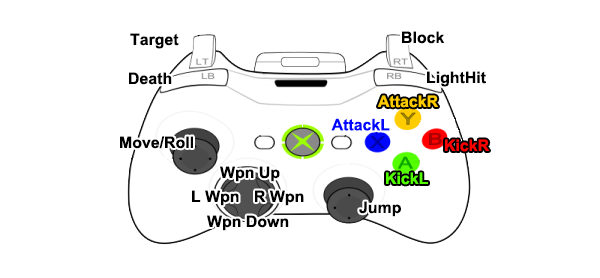
<style>
.page{position:relative;width:600px;height:278px;background:#ffffff}
.page>*{position:absolute;margin:0}
.t1{font:15.9px "Arial-BoldMT";color:#000000}
.t2{font:15.9px "Arial-BoldMT";color:#ffcc00}
.t3{font:15.9px "Arial-BoldMT";color:#0006ff}
.t4{font:15.9px "Arial-BoldMT";color:#ff0000}
.t5{font:15.9px "Arial-BoldMT";color:#54ff00}
</style>
<div class="page">
<p class="t1" style="left:130px;top:33px;width:49px;height:16px">Target</p>
<p class="t1" style="left:402px;top:31px;width:43px;height:13px">Block</p>
<p class="t1" style="left:129px;top:72px;width:43px;height:13px">Death</p>
<p class="t1" style="left:427px;top:71px;width:59px;height:16px">LightHit</p>
<p class="t2" style="left:378px;top:95px;width:60px;height:13px">AttackR</p>
<p class="t3" style="left:331px;top:118px;width:59px;height:13px">AttackL</p>
<p class="t1" style="left:120px;top:136px;width:73px;height:13px">Move/Roll</p>
<p class="t4" style="left:445px;top:139px;width:44px;height:13px">KickR</p>
<p class="t1" style="left:220px;top:166px;width:60px;height:16px">Wpn Up</p>
<p class="t5" style="left:386px;top:172px;width:42px;height:13px">KickL</p>
<p class="t1" style="left:192px;top:190px;width:47px;height:16px">L Wpn</p>
<p class="t1" style="left:255px;top:190px;width:49px;height:16px">R Wpn</p>
<p class="t1" style="left:359px;top:201px;width:42px;height:16px">Jump</p>
<p class="t1" style="left:207px;top:215px;width:82px;height:16px">Wpn Down</p>
</div>
